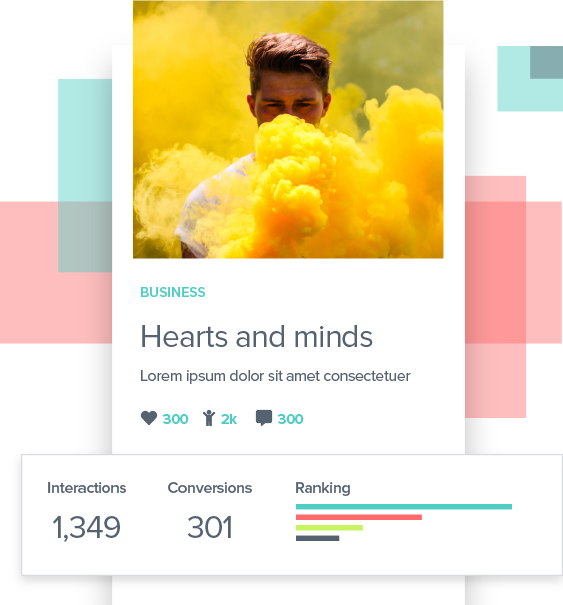
<style>
.page{position:relative;width:563px;height:605px;background:#ffffff}
.page>*{position:absolute;margin:0}
.t1{font:16px/24px "ProximaNova-Regular";letter-spacing:-0.025em;color:#556270}
.t2{font:14px/24px "ProximaNova-Semibold";color:#4ecdc4}
.t3{font:32px/40px "ProximaNova-Regular";letter-spacing:-0.025em;color:#556270}
.t4{font:16px/24px "ProximaNova-Semibold";letter-spacing:-0.025em;color:#556270}
.t5{font:16px "ProximaNova-Semibold";letter-spacing:-0.025em;color:#556270}
</style>
<div class="page">
<p class="t1" style="left:141px;top:287px;width:270px;height:97px"><span class="t2">BUSINESS<br></span><span class="t3">Hearts and minds<br></span>Lorem ipsum dolor sit amet consectetuer</p>
<p class="t4" style="left:48px;top:482px;width:78px;height:60px;text-align:center">Interactions<br><span class="t3">1,349</span></p>
<p class="t4" style="left:168px;top:482px;width:84px;height:56px;text-align:center">Conversions<br><span class="t3">301</span></p>
<p class="t5" style="left:296px;top:482px;width:54px;height:14px">Ranking</p>
</div>
